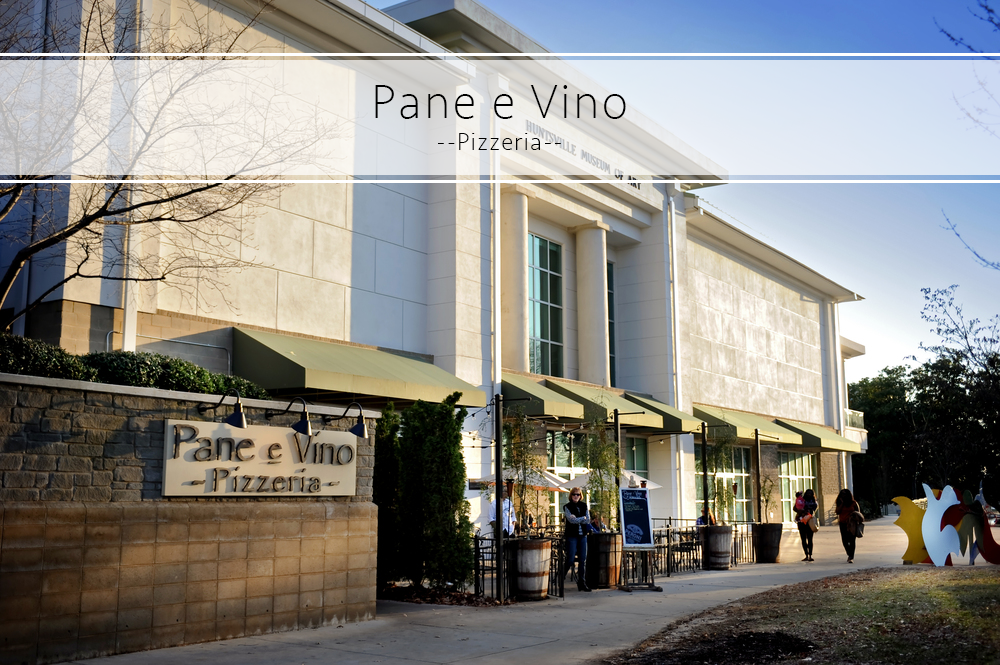
<style>
.page{position:relative;width:1000px;height:665px}
.page>*{position:absolute;margin:0}
.t1{font:50px "Seravek-ExtraLight";letter-spacing:0.05em;color:#000000}
.t2{font:25px "Seravek-ExtraLight";letter-spacing:0.05em;color:#000000}
</style>
<div class="page">
<p class="t1" style="left:375px;top:85px;width:251px;height:34px">Pane e Vino</p>
<p class="t2" style="left:438px;top:133px;width:123px;height:17px">--Pizzeria--</p>
</div>
